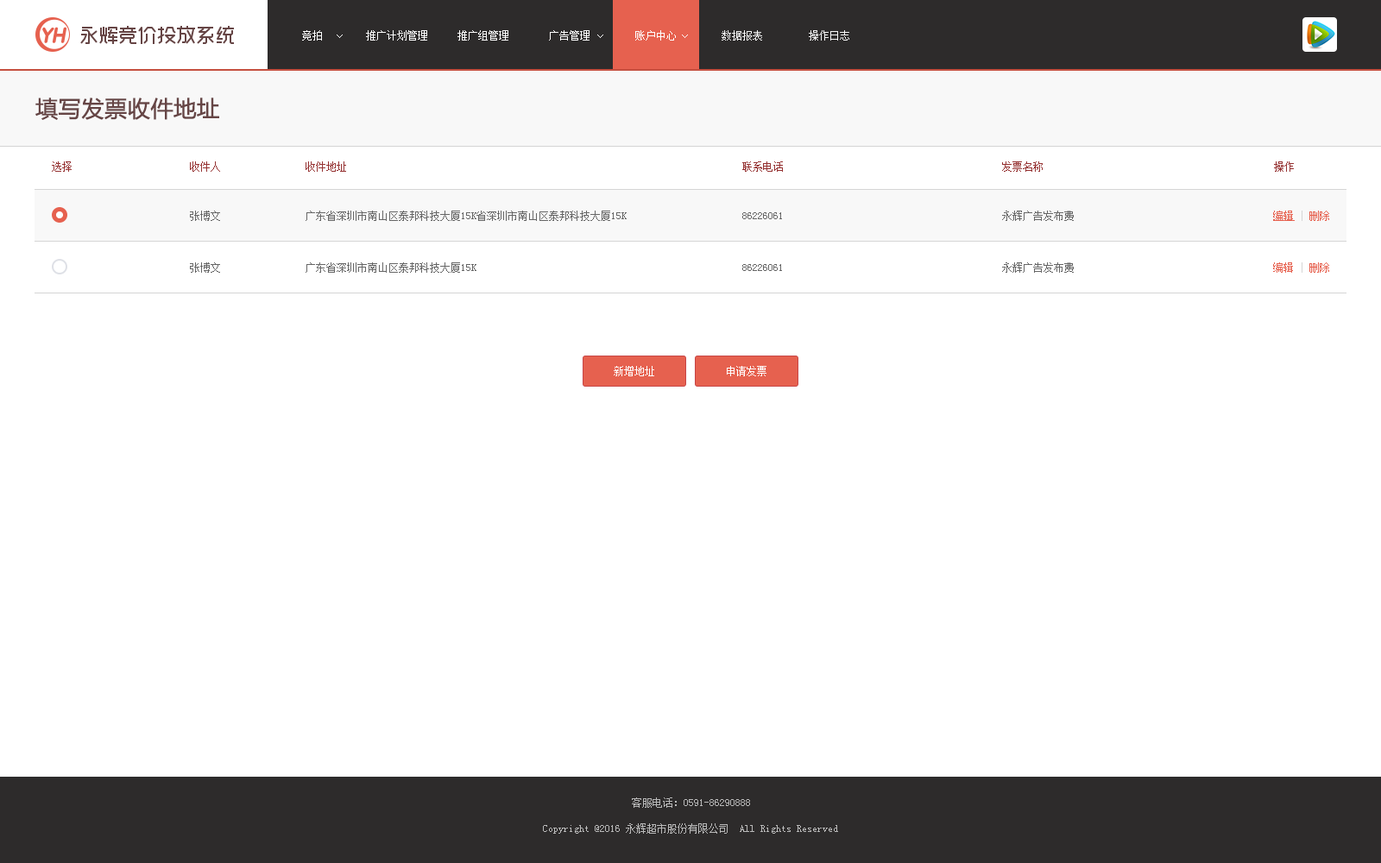
<style>
.page{position:relative;width:1381px;height:863px;background:#ffffff}
.page>*{position:absolute;margin:0}
.t1{font:10.4px "SimSun";color:#ffffff}
.t2{font:10.4px "SimSun";color:#f8f8f8}
.t3{font:22.4px "MicrosoftYaHei";color:#664545;font-weight:bold}
.t4{font:10.4px "SimSun";color:#953232}
.t5{font:10.4px "SimSun";color:#666666}
.t6{font:10.4px "SimSun";color:#e6614f;text-decoration:underline}
.t7{font:10.4px "SimSun";color:#d5d5d5}
.t8{font:10.4px "SimSun";color:#e6614f}
.t9{font:10.4px "SimSun";color:#bababa}
</style>
<div class="page">
<p class="t1" style="left:302px;top:30px;width:20px;height:11px">竞拍</p>
<p class="t1" style="left:366px;top:30px;width:61px;height:11px">推广计划管理</p>
<p class="t1" style="left:458px;top:30px;width:50px;height:11px">推广组管理</p>
<p class="t1" style="left:549px;top:30px;width:41px;height:11px">广告管理</p>
<p class="t1" style="left:635px;top:30px;width:41px;height:11px">账户中心</p>
<p class="t1" style="left:635px;top:30px;width:41px;height:11px">账户中心</p>
<p class="t2" style="left:722px;top:30px;width:40px;height:11px">数据报表</p>
<p class="t2" style="left:809px;top:30px;width:40px;height:11px">操作日志</p>
<p class="t3" style="left:35px;top:98px;width:184px;height:22px">填写发票收件地址</p>
<p class="t4" style="left:52px;top:161px;width:20px;height:11px">选择</p>
<p class="t4" style="left:190px;top:161px;width:30px;height:11px">收件人</p>
<p class="t4" style="left:306px;top:161px;width:40px;height:11px">收件地址</p>
<p class="t4" style="left:742px;top:161px;width:41px;height:11px">联系电话</p>
<p class="t4" style="left:1002px;top:161px;width:41px;height:11px">发票名称</p>
<p class="t4" style="left:1274px;top:161px;width:20px;height:11px">操作</p>
<p class="t5" style="left:190px;top:211px;width:30px;height:10px">张博文</p>
<p class="t5" style="left:306px;top:211px;width:321px;height:10px">广东省深圳市南山区泰邦科技大厦15K省深圳市南山区泰邦科技大厦15K</p>
<p class="t5" style="left:742px;top:212px;width:40px;height:7px">86226061</p>
<p class="t5" style="left:1002px;top:211px;width:72px;height:10px">永辉广告发布费</p>
<p class="t6" style="left:1273px;top:211px;width:56px;height:10px">编辑 <span class="t7">| </span><span class="t8">删除</span></p>
<p class="t5" style="left:190px;top:262px;width:30px;height:11px">张博文</p>
<p class="t5" style="left:306px;top:262px;width:171px;height:11px">广东省深圳市南山区泰邦科技大厦15K</p>
<p class="t5" style="left:742px;top:264px;width:40px;height:7px">86226061</p>
<p class="t5" style="left:1002px;top:262px;width:72px;height:11px">永辉广告发布费</p>
<p class="t8" style="left:1273px;top:262px;width:56px;height:11px">编辑 <span class="t7">| </span>删除</p>
<p class="t1" style="left:614px;top:366px;width:40px;height:10px">新增地址</p>
<p class="t1" style="left:727px;top:366px;width:40px;height:10px">申请发票</p>
<p class="t9" style="left:632px;top:798px;width:118px;height:10px">客服电话：0591-86290888</p>
<p class="t9" style="left:543px;top:824px;width:295px;height:10px">Copyright @2016 永辉超市股份有限公司  All Rights Reserved</p>
</div>
